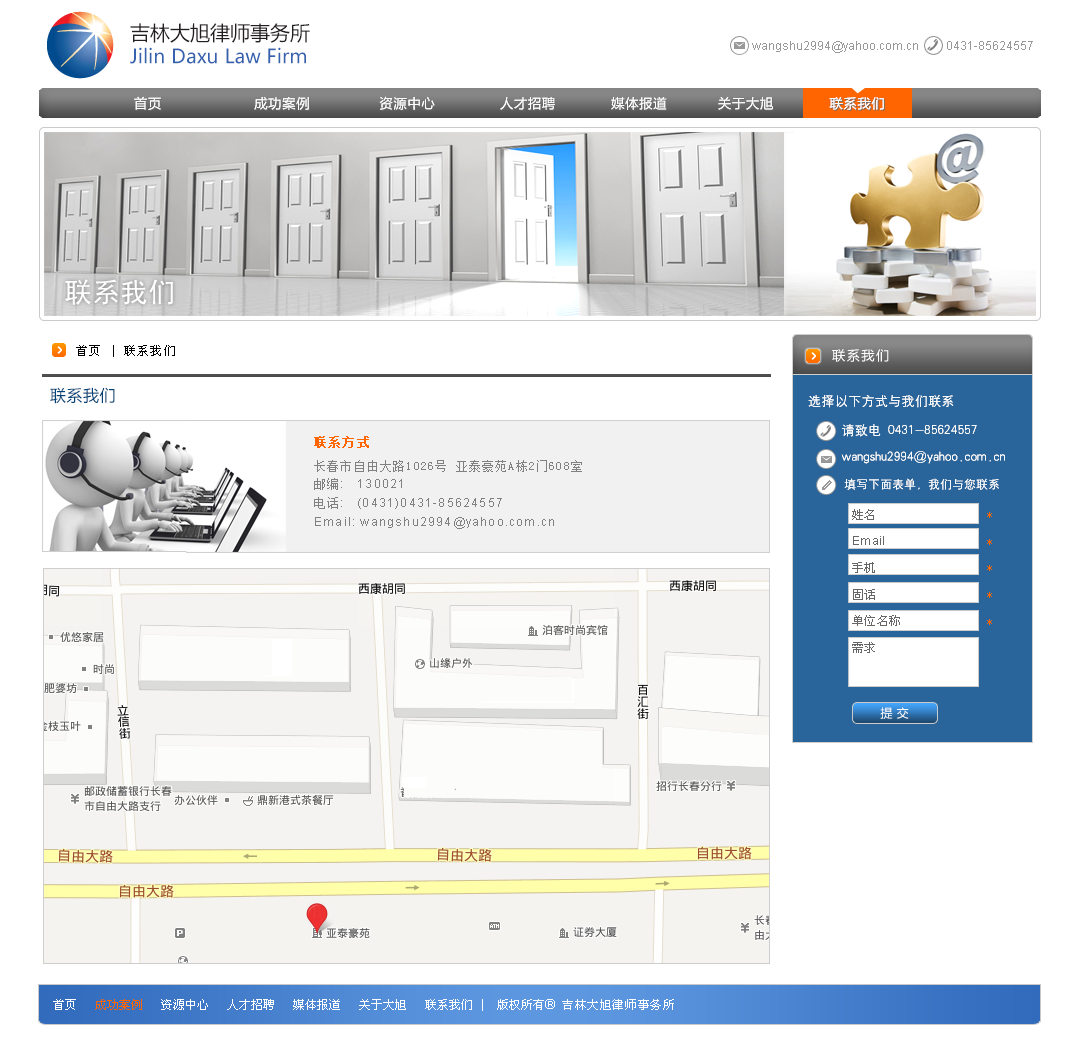
<style>
.page{position:relative;width:1084px;height:1056px;background:#ffffff}
.page>*{position:absolute;margin:0}
.t1{font:19.5px "MicrosoftYaHei";color:#3562ae}
.t2{font:20px "MicrosoftYaHei";color:#231f20}
.t3{font:12px "ArialMT";color:#989898}
.t4{font:13.3px "MicrosoftYaHei";letter-spacing:0.05em;color:#fffefe}
.t5{font:28px "SimHei";color:#ffffff}
.t6{font:12px "SimSun";letter-spacing:0.1em;color:#000000}
.t7{font:13.3px "MicrosoftYaHei";letter-spacing:0.1em;color:#ffffff}
.t8{font:16px "MicrosoftYaHei";letter-spacing:0.029em;color:#004378}
.t9{font:13.3px/29.3px "HYg2gj";color:#ffffff}
.t10{font:13.3px/26.7px "HYg2gj";color:#ffffff}
.t11{font:12px/26.7px "HYg2gj";color:#ffffff}
.t12{font:12px/18.7px "ArialMT";letter-spacing:0.1em;color:#808080}
.t13{font:12px/24px "SimSun";letter-spacing:0.1em;color:#ff6500;font-weight:bold}
.t14{font:12px/18.7px "SimSun";letter-spacing:0.1em;color:#808080}
.t15{font:12px/26.7px "SimSun";letter-spacing:0.029em;color:#666666}
.t16{font:12px/26.7px "ArialMT";letter-spacing:0.029em;color:#666666}
.t17{font:12px/26.7px "SimSun";letter-spacing:0.029em;color:#ff6500}
.t18{font:12px "MicrosoftYaHei";letter-spacing:0.029em;color:#ffffff}
.t19{font:12px "SimSun";color:#ffffff}
.t20{font:12px "SimSun";color:#ff6500}
.t21{font:13.3px "ArialMT";color:#ffffff}
.t22{font:12px "SimSun";letter-spacing:0.05em;color:#ffffff}
</style>
<div class="page">
<p class="t1" style="left:130px;top:23px;width:180px;height:41px"><span class="t2">吉林大旭律师事务所<br></span>Jilin Daxu Law Firm</p>
<p class="t3" style="left:752px;top:41px;width:281px;height:12px">wangshu2994@yahoo.com.cn         0431-85624557</p>
<p class="t4" style="left:134px;top:96px;width:750px;height:14px">首页                    成功案例               资源中心              人才招聘            媒体报道           关于大旭            联系我们</p>
<p class="t4" style="left:134px;top:96px;width:750px;height:14px">首页                    成功案例               资源中心              人才招聘            媒体报道           关于大旭            联系我们</p>
<p class="t5" style="left:65px;top:279px;width:108px;height:26px">联系我们</p>
<p class="t6" style="left:76px;top:345px;width:99px;height:12px">首页 | 联系我们</p>
<p class="t7" style="left:832px;top:349px;width:57px;height:13px">联系我们</p>
<p class="t7" style="left:832px;top:349px;width:57px;height:13px">联系我们</p>
<p class="t8" style="left:50px;top:387px;width:65px;height:17px">联系我们</p>
<p class="t9" style="left:808px;top:395px;width:197px;height:95px">选择以下方式与我们联系<br>     请致电 0431-85624557<br><span class="t10">     wangshu2994@yahoo.com.cn<br></span><span class="t11">      填写下面表单，我们与您联系</span></p>
<p class="t9" style="left:808px;top:395px;width:197px;height:95px">选择以下方式与我们联系<br>     请致电 0431-85624557<br><span class="t10">     wangshu2994@yahoo.com.cn<br></span><span class="t11">      填写下面表单，我们与您联系</span></p>
<p class="t12" style="left:314px;top:436px;width:268px;height:93px"><span class="t13">联系方式<br></span><span class="t14">长春市自由大路1026号 亚泰豪苑A栋2门608室 <br>邮编</span>:   130021<br><span class="t14">电话</span>:   (0431)0431-85624557<br>Email: wangshu2994@yahoo.com.cn</p>
<p class="t15" style="left:852px;top:509px;width:48px;height:144px">姓名<br><span class="t16">Email<br></span>手机<br>固话<br>单位名称<br>需求</p>
<p class="t17" style="left:987px;top:512px;width:5px;height:113px">*<br>*<br>*<br>*<br>*</p>
<p class="t18" style="left:880px;top:707px;width:29px;height:12px">提 交</p>
<p class="t19" style="left:53px;top:999px;width:621px;height:12px">首页   <span class="t20">成功案例 </span>  资源中心   人才招聘   媒体报道   关于大旭   联系我们 |  版权所有<span class="t21">® </span><span class="t22">吉林大旭律师事务所</span></p>
</div>
